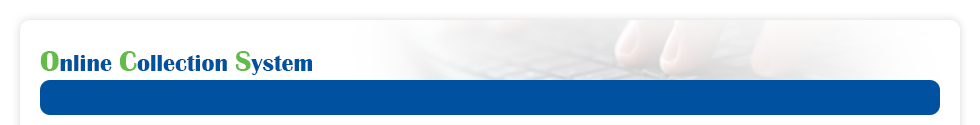
<style>
.page{position:relative;width:980px;height:125px;background:#ffffff}
.page>*{position:absolute;margin:0}
.t1{font:24px "BritannicBold";color:#0052a1}
.t2{font:30px "BritannicBold";color:#63bc48}
</style>
<div class="page">
<p class="t1" style="left:40px;top:51px;width:272px;height:24px"><span class="t2">O</span>nline <span class="t2">C</span>ollection <span class="t2">S</span>ystem</p>
</div>
